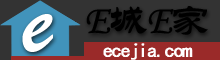
<style>
.page{position:relative;width:220px;height:60px;background:#333333}
.page>*{position:absolute;margin:0}
.t1{font:40px "STLiti";letter-spacing:-0.06em;color:#000000;font-weight:bold}
.t2{font:100px "STXingkai";letter-spacing:-0.06em;color:#ffffff;font-weight:bold}
.t3{font:20px "¿¬Ìå";letter-spacing:-0.06em;color:#ffffff;font-weight:bold}
</style>
<div class="page">
<p class="t1" style="left:86px;top:6px;width:122px;height:29px">E城E家</p>
<p class="t2" style="left:22px;top:14px;width:31px;height:38px">e</p>
<p class="t3" style="left:103px;top:43px;width:90px;height:17px">ecejia.com</p>
</div>
